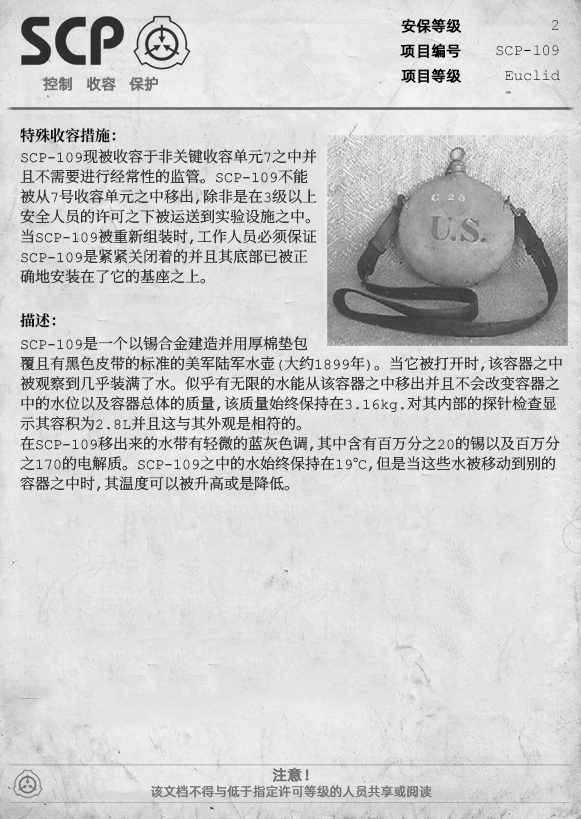
<style>
.page{position:relative;width:581px;height:819px}
.page>*{position:absolute;margin:0}
.t1{font:15px "AlibabaPuHuiTiR";color:#000000;font-weight:bold}
.t2{font:15px "AlibabaPuHuiTiR";color:#707070;font-weight:bold}
.t3{font:15px "ContainmentBreach-Bold";color:#121212}
.t4{font:15px/20px "ContainmentBreach-Regular";color:#353535}
.t5{font:13px "AlibabaPuHuiTiR";color:#707070}
</style>
<div class="page">
<p class="t1" style="left:401px;top:18px;width:61px;height:15px">安保等级</p>
<p class="t1" style="left:400px;top:43px;width:61px;height:15px">项目编号</p>
<p class="t2" style="left:43px;top:76px;width:115px;height:15px">控制   收容   保护</p>
<p class="t1" style="left:401px;top:68px;width:61px;height:15px">项目等级</p>
<p class="t3" style="left:20px;top:128px;width:96px;height:15px">特殊收容措施：</p>
<p class="t4" style="left:20px;top:149px;width:297px;height:135px">SCP-109现被收容于非关键收容单元7之中并<br>且不需要进行经常性的监管。SCP-109不能<br>被从7号收容单元之中移出，除非是在3级以上<br>安全人员的许可之下被运送到实验设施之中。<br>当SCP-109被重新组装时，工作人员必须保证<br>SCP-109是紧紧关闭着的并且其底部已被正<br>确地安装在了它的基座之上。</p>
<p class="t3" style="left:20px;top:313px;width:36px;height:15px">描述：</p>
<p class="t4" style="left:20px;top:336px;width:542px;height:156px">SCP-109是一个以锡合金建造并用厚棉垫包<br>覆且有黑色皮带的标准的美军陆军水壶（大约1899年）。当它被打开时，该容器之中<br>被观察到几乎装满了水。似乎有无限的水能从该容器之中移出并且不会改变容器之<br>中的水位以及容器总体的质量，该质量始终保持在3.16kg.对其内部的探针检查显<br>示其容积为2.8L并且这与其外观是相符的。<br>在SCP-109移出来的水带有轻微的蓝灰色调，其中含有百万分之20的锡以及百万分<br>之170的电解质。SCP-109之中的水始终保持在19°C，但是当这些水被移动到别的<br>容器之中时，其温度可以被升高或是降低。</p>
<p class="t2" style="left:272px;top:767px;width:37px;height:15px">注意！</p>
<p class="t5" style="left:151px;top:785px;width:281px;height:13px">该文档不得与低于指定许可等级的人员共享或阅读</p>
</div>
